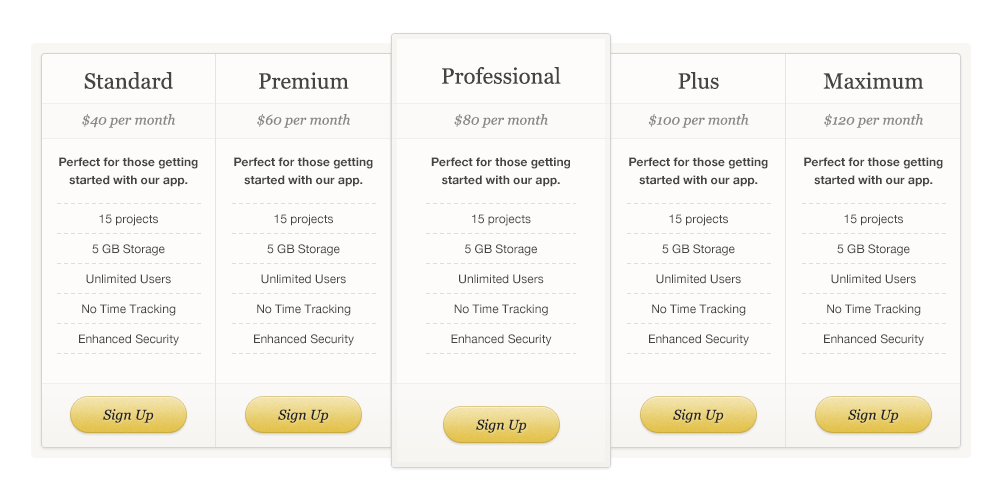
<style>
.page{position:relative;width:1000px;height:500px;background:#fdfcfa}
.page>*{position:absolute;margin:0}
.t1{font:22px "Georgia";color:#444444}
.t2{font:14px "Georgia-Italic";color:#888888}
.t3{font:12px/18px "HelveticaNeue-Bold";color:#444444}
.t4{font:12px/30px "HelveticaNeue";color:#444444}
.t5{font:14px "Georgia-Italic";color:#252525}
</style>
<div class="page">
<p class="t1" style="left:84px;top:72px;width:89px;height:17px">Standard</p>
<p class="t1" style="left:259px;top:72px;width:90px;height:17px">Premium</p>
<p class="t1" style="left:442px;top:67px;width:119px;height:17px">Professional</p>
<p class="t1" style="left:678px;top:72px;width:41px;height:17px">Plus</p>
<p class="t1" style="left:823px;top:72px;width:101px;height:17px">Maximum</p>
<p class="t2" style="left:82px;top:114px;width:93px;height:14px">$40 per month</p>
<p class="t2" style="left:257px;top:114px;width:93px;height:14px">$60 per month</p>
<p class="t2" style="left:454px;top:114px;width:94px;height:14px">$80 per month</p>
<p class="t2" style="left:648px;top:114px;width:101px;height:14px">$100 per month</p>
<p class="t2" style="left:824px;top:114px;width:99px;height:14px">$120 per month</p>
<p class="t3" style="left:59px;top:157px;width:139px;height:30px;text-align:center">Perfect for those getting started with our app.</p>
<p class="t3" style="left:234px;top:157px;width:139px;height:30px;text-align:center">Perfect for those getting started with our app.</p>
<p class="t3" style="left:431px;top:157px;width:139px;height:30px;text-align:center">Perfect for those getting started with our app.</p>
<p class="t3" style="left:629px;top:157px;width:139px;height:30px;text-align:center">Perfect for those getting started with our app.</p>
<p class="t3" style="left:804px;top:157px;width:139px;height:30px;text-align:center">Perfect for those getting started with our app.</p>
<p class="t4" style="left:79px;top:214px;width:100px;height:132px;text-align:center">15 projects<br>5 GB Storage<br>Unlimited Users<br>No Time Tracking<br>Enhanced Security</p>
<p class="t4" style="left:254px;top:214px;width:100px;height:132px;text-align:center">15 projects<br>5 GB Storage<br>Unlimited Users<br>No Time Tracking<br>Enhanced Security</p>
<p class="t4" style="left:451px;top:214px;width:101px;height:132px;text-align:center">15 projects<br>5 GB Storage<br>Unlimited Users<br>No Time Tracking<br>Enhanced Security</p>
<p class="t4" style="left:649px;top:214px;width:100px;height:132px;text-align:center">15 projects<br>5 GB Storage<br>Unlimited Users<br>No Time Tracking<br>Enhanced Security</p>
<p class="t4" style="left:824px;top:214px;width:100px;height:132px;text-align:center">15 projects<br>5 GB Storage<br>Unlimited Users<br>No Time Tracking<br>Enhanced Security</p>
<p class="t5" style="left:103px;top:409px;width:51px;height:14px">Sign Up</p>
<p class="t5" style="left:278px;top:409px;width:51px;height:14px">Sign Up</p>
<p class="t5" style="left:673px;top:409px;width:51px;height:14px">Sign Up</p>
<p class="t5" style="left:848px;top:409px;width:51px;height:14px">Sign Up</p>
<p class="t5" style="left:476px;top:419px;width:51px;height:14px">Sign Up</p>
</div>
